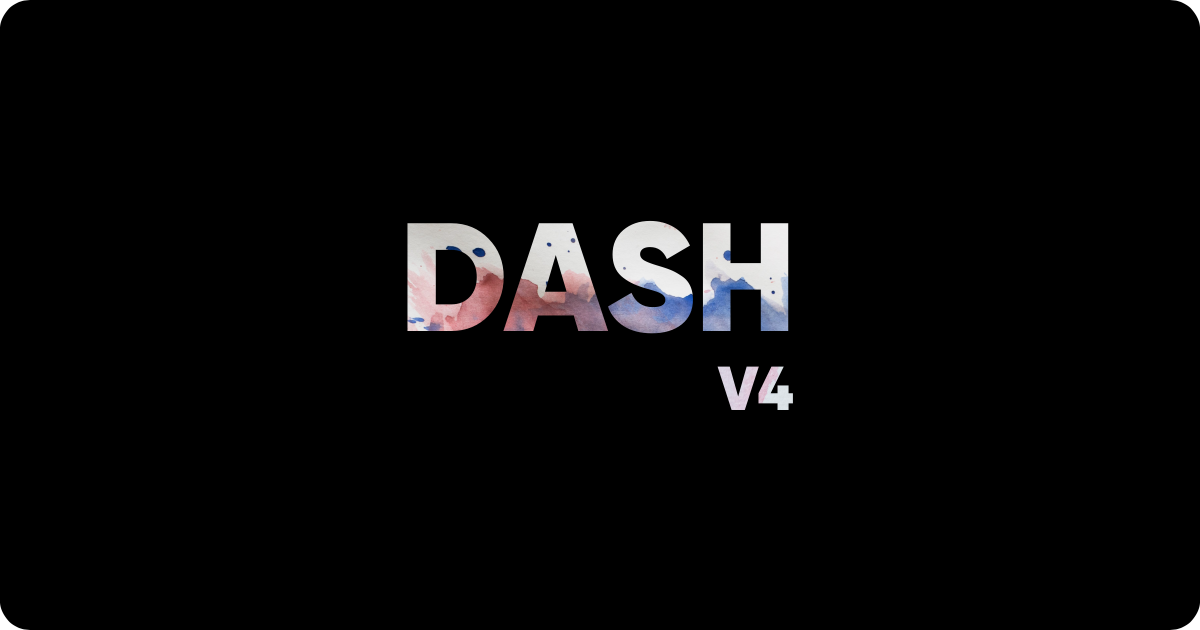
<style>
.page{position:relative;width:1200px;height:630px;background:#000000}
.page>*{position:absolute;margin:0}
.t1{font:154px "Gilroy-Black"}
.t2{font:62px "Gilroy-Black";color:#dcd2e0}
</style>
<div class="page">
<p class="t1" style="left:407px;top:220px;width:382px;height:114px">DASH</p>
<p class="t2" style="left:717px;top:366px;width:76px;height:45px">V4</p>
</div>
